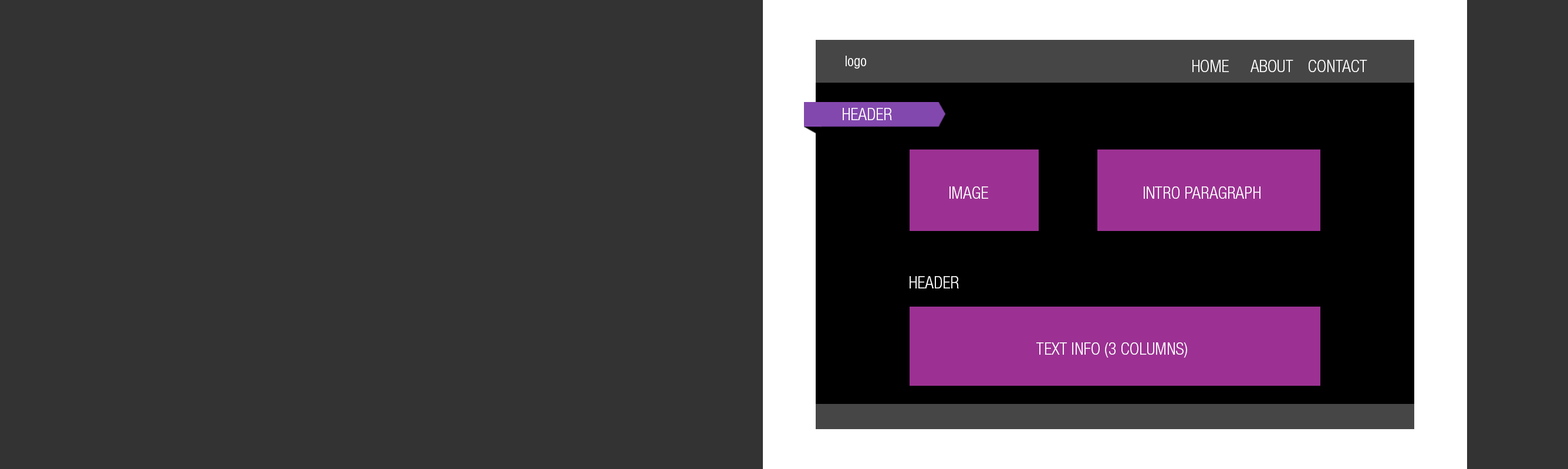
<style>
.page{position:relative;width:1568px;height:469px;background:#333333}
.page>*{position:absolute;margin:0}
.t1{font:14.7px "HelveticaNeue-LightCond";color:#ffffff}
.t2{font:17.1px "HelveticaNeue-LightCond";color:#ffffff}
</style>
<div class="page">
<p class="t1" style="left:846px;top:56px;width:20px;height:13px">logo</p>
<p class="t2" style="left:1192px;top:60px;width:37px;height:12px">HOME</p>
<p class="t2" style="left:1251px;top:60px;width:42px;height:12px">ABOUT</p>
<p class="t2" style="left:1309px;top:60px;width:58px;height:12px">CONTACT</p>
<p class="t2" style="left:843px;top:108px;width:49px;height:12px">HEADER</p>
<p class="t2" style="left:949px;top:187px;width:39px;height:12px">IMAGE</p>
<p class="t2" style="left:1144px;top:187px;width:117px;height:12px">INTRO PARAGRAPH</p>
<p class="t2" style="left:910px;top:276px;width:49px;height:13px">HEADER</p>
<p class="t2" style="left:1036px;top:343px;width:151px;height:15px">TEXT INFO (3 COLUMNS)</p>
</div>
